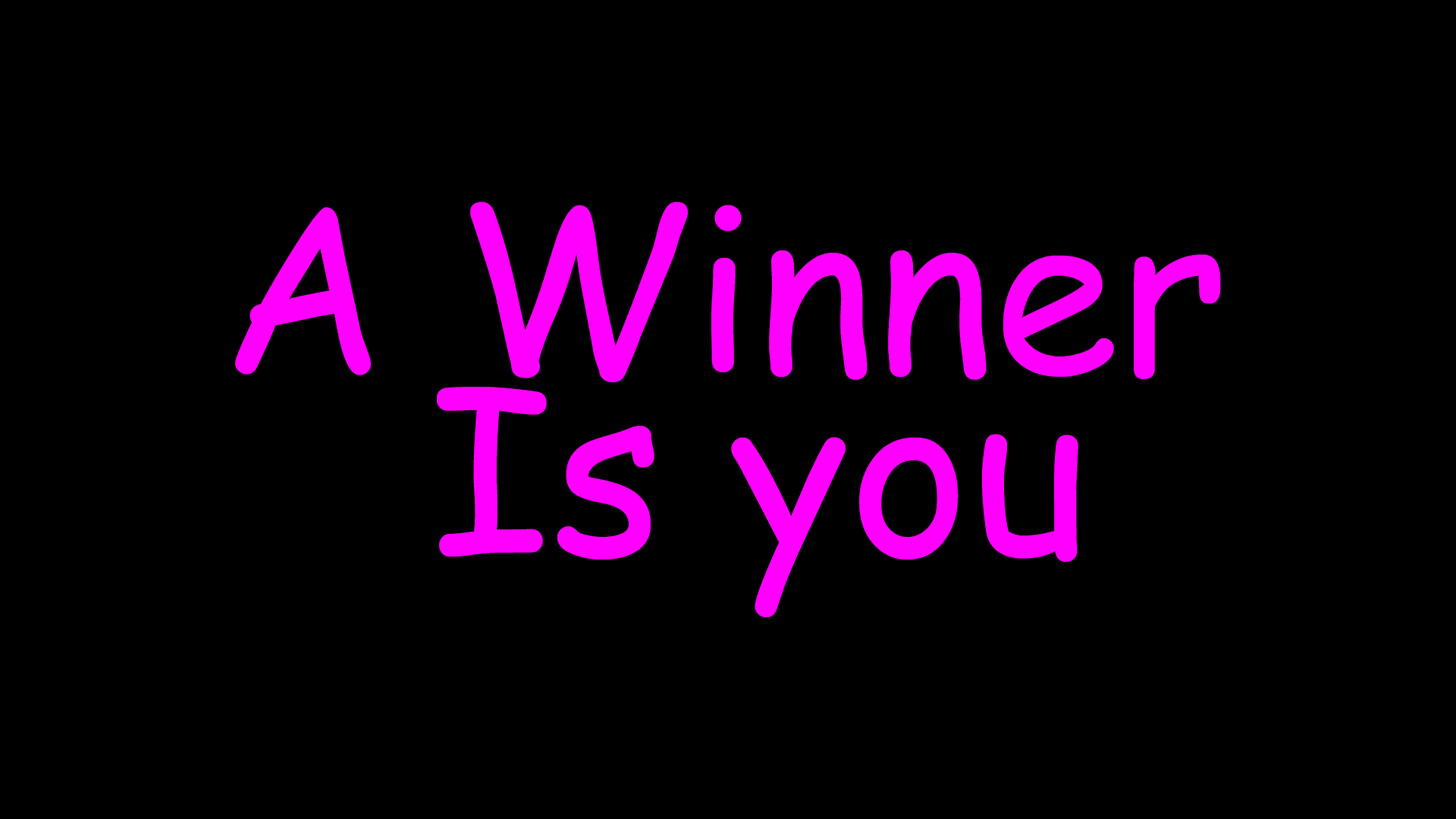
<style>
.page{position:relative;width:1456px;height:819px;background:#000000}
.page>*{position:absolute;margin:0}
.t1{font:227.5px/19px "ComicSansMS";color:#ff00ff}
</style>
<div class="page">
<p class="t1" style="left:235px;top:202px;width:986px;height:415px;text-align:center">A Winner <br><br><br><br><br><br>Is you</p>
</div>
